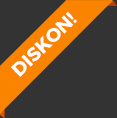
<style>
.page{position:relative;width:117px;height:118px;background:#333333}
.page>*{position:absolute;margin:0}
.t1{font:19px "Montserrat-Bold";color:#fefefe}
</style>
<div class="page">
<p class="t1" style="left:11px;top:11px;width:66px;height:66px;rotate:-44deg">DISKON!</p>
</div>
